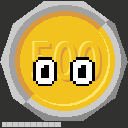
<style>
.page{position:relative;width:128px;height:128px;background:#f2c31e}
.page>*{position:absolute;margin:0}
.t1{font:84.4px "MicrosoftJhengHeiBold";color:#cc9253;scale:0.8 1}
.t2{font:50px "MicrosoftJhengHeiBold";color:#ffe56a;scale:0.8 1}
.t3{font:50px "MicrosoftJhengHeiBold";color:#f3c31f;scale:0.8 1}
.t4{font:50px "MicrosoftJhengHeiBold";color:#da9a3c;scale:0.8 1}
</style>
<div class="page">
<p class="t1" style="left:51px;top:26px;width:32px;height:65px">1</p>
<p class="t2" style="left:31px;top:41px;width:68px;height:38px">500</p>
<p class="t3" style="left:33px;top:42px;width:68px;height:38px">500</p>
<p class="t4" style="left:35px;top:44px;width:68px;height:38px">500</p>
</div>
